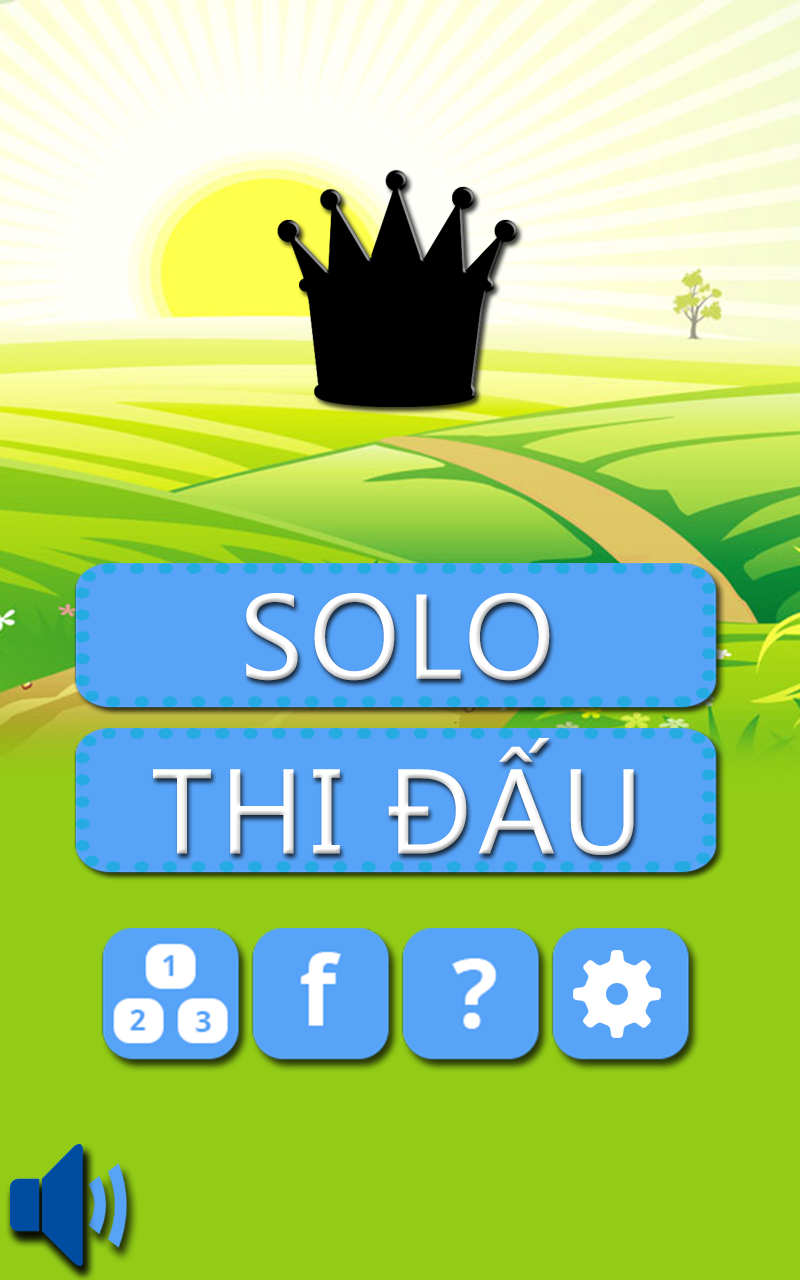
<style>
.page{position:relative;width:800px;height:1280px;background:#92cc16}
.page>*{position:absolute;margin:0}
.t1{font:120px "SegoeUI";letter-spacing:0.05em;color:#ffffff}
</style>
<div class="page">
<p class="t1" style="left:246px;top:593px;width:304px;height:88px">SOLO</p>
<p class="t1" style="left:153px;top:738px;width:481px;height:117px">THI ĐẤU</p>
</div>
